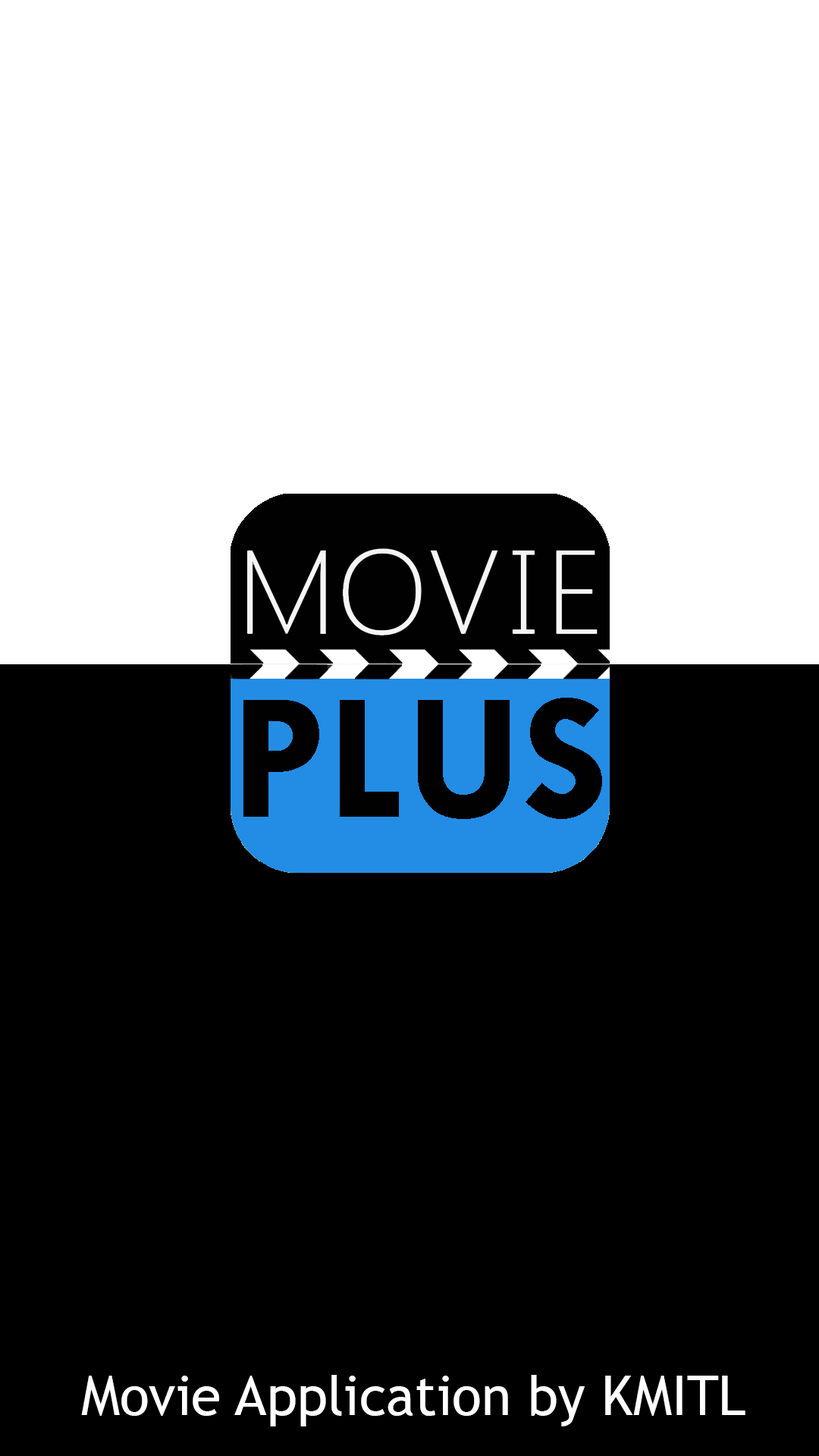
<style>
.page{position:relative;width:819px;height:1456px;background:#000000}
.page>*{position:absolute;margin:0}
.t1{font:54.6px "TrebuchetMS";color:#ffffff}
</style>
<div class="page">
<p class="t1" style="left:81px;top:1375px;width:664px;height:51px">Movie Application by KMITL</p>
</div>
